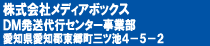
<style>
.page{position:relative;width:210px;height:46px;background:#0053a6}
.page>*{position:absolute;margin:0}
.t1{font:12px/11px "HGPSoeiKakugothicUB";color:#ffffff;scale:0.83 1}
.t2{font:14.4px/16px "HGPSoeiKakugothicUB";color:#ffffff;scale:0.83 1}
.t3{font:13.2px/14px "HGPSoeiKakugothicUB";color:#ffffff;scale:0.83 1}
</style>
<div class="page">
<p class="t1" style="left:3px;top:2px;width:161px;height:43px"><span class="t2">株式会社メディアボックス<br></span><span class="t3">ＤＭ発送代行センター事業部<br></span>愛知県愛知郡東郷町三ツ池４－５－２</p>
</div>
